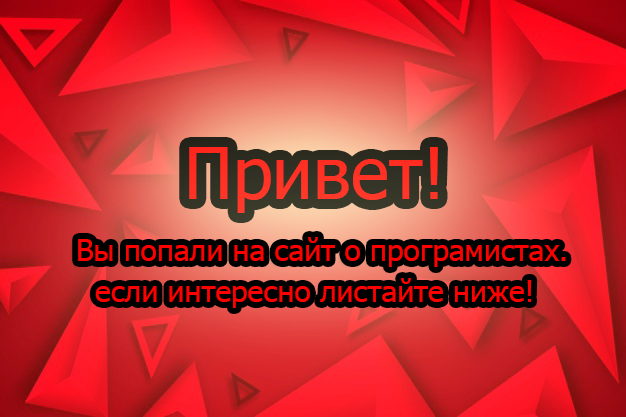
<style>
.page{position:relative;width:626px;height:417px}
.page>*{position:absolute;margin:0}
.t1{font:72px "Tahoma";color:#ff3125}
.t2{font:30px "Tahoma";color:#ff0000}
</style>
<div class="page">
<p class="t1" style="left:189px;top:147px;width:249px;height:66px">Привет!</p>
<p class="t2" style="left:78px;top:237px;width:488px;height:30px">Вы попали на сайт о програмистах.</p>
<p class="t2" style="left:95px;top:278px;width:437px;height:30px">если интересно листайте ниже!</p>
</div>
